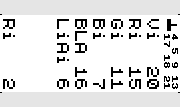
<style>
.page{position:relative;width:180px;height:107px;background:#ffffff}
.page>*{position:absolute;margin:0}
.t1{font:16px/18px "ZX 6x8";color:#000000}
</style>
<div class="page">
<p class="t1" style="left:3px;top:19px;width:156px;height:70px;rotate:90deg">Vi  20<br>Ri  15<br>Gi  11<br>Bi   7<br>BLA 16<br>LiAi 6<br><br><br>Ri   2</p>
</div>
